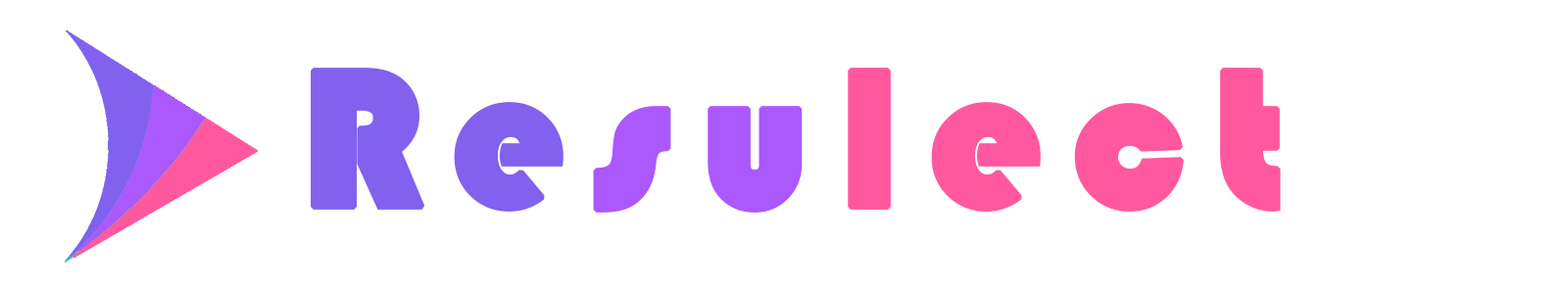
<style>
.page{position:relative;width:1568px;height:294px;background:#ffffff}
.page>*{position:absolute;margin:0}
.t1{font:204.2px "Bauhaus93";letter-spacing:0.12em;color:#ff589e;font-weight:bold}
.t2{font:204.2px "Bauhaus93";letter-spacing:0.12em;color:#8261ee;font-weight:bold}
.t3{font:204.2px "Bauhaus93";letter-spacing:0.12em;color:#ab58ff;font-weight:bold}
</style>
<div class="page">
<p class="t1" style="left:311px;top:68px;width:970px;height:145px"><span class="t2">Re</span><span class="t3">su</span>lect</p>
</div>
